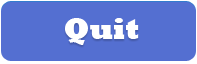
<style>
.page{position:relative;width:197px;height:64px;background:#546fd1}
.page>*{position:absolute;margin:0}
.t1{font:30px "Rockwell-ExtraBold";color:#ffffff}
</style>
<div class="page">
<p class="t1" style="left:65px;top:18px;width:74px;height:27px">Quit</p>
</div>
